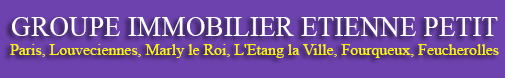
<style>
.page{position:relative;width:505px;height:78px;background:#6d42ae}
.page>*{position:absolute;margin:0}
.t1{font:15.9px/19.1px "TimesNewRomanPSMT";color:#fef500}
.t2{font:27.6px/19.1px "TimesNewRomanPSMT";color:#ffffff}
</style>
<div class="page">
<p class="t1" style="left:10px;top:17px;width:489px;height:41px;text-align:center"><span class="t2">GROUPE IMMOBILIER ETIENNE PETIT<br></span>Paris, Louveciennes, Marly le Roi, L'Etang la Ville, Fourqueux, Feucherolles</p>
</div>
